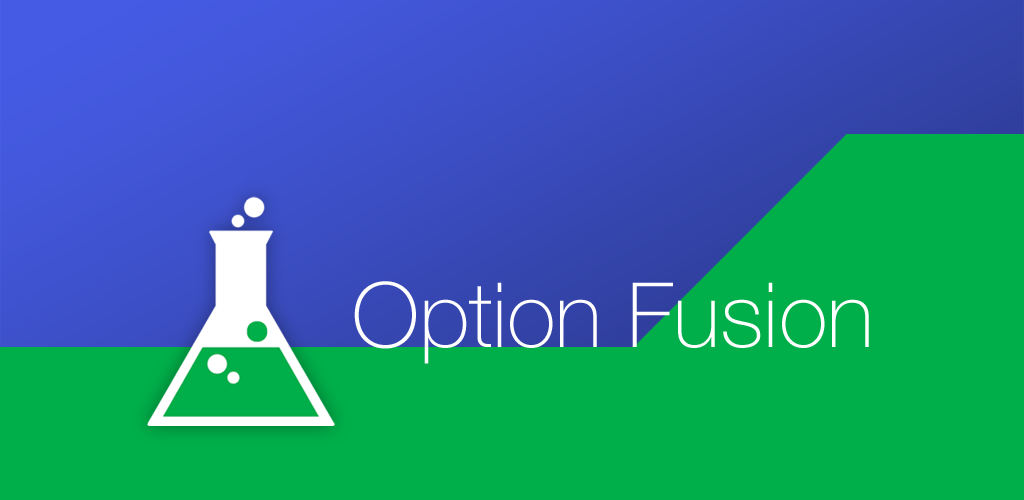
<style>
.page{position:relative;width:1024px;height:500px;background:#00af49}
.page>*{position:absolute;margin:0}
.t1{font:90px "HelveticaNeue-Thin";color:#ffffff}
</style>
<div class="page">
<p class="t1" style="left:354px;top:281px;width:515px;height:83px">Option Fusion</p>
</div>
